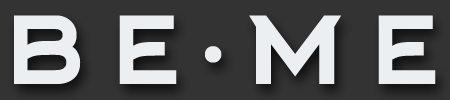
<style>
.page{position:relative;width:450px;height:100px;background:#333333}
.page>*{position:absolute;margin:0}
.t1{font:132.1px "Arkhip";letter-spacing:0.1em;color:#ececec}
.t2{font:137.4px "Arkhip";letter-spacing:0.2em;color:#ececec}
</style>
<div class="page">
<p class="t1" style="left:14px;top:15px;width:163px;height:69px">be</p>
<p class="t1" style="left:249px;top:15px;width:187px;height:69px">me</p>
<p class="t2" style="left:205px;top:46px;width:17px;height:17px">.</p>
</div>
